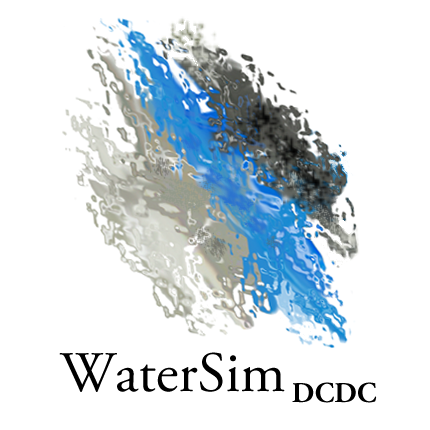
<style>
.page{position:relative;width:430px;height:430px;background:#ffffff}
.page>*{position:absolute;margin:0}
.t1{font:57.3px "AGaramondPro-Regular";color:#000000}
.t2{font:28.7px "AGaramondPro-Bold";color:#000000}
</style>
<div class="page">
<p class="t1" style="left:59px;top:352px;width:226px;height:40px">WaterSim</p>
<p class="t2" style="left:292px;top:382px;width:85px;height:21px">DCDC</p>
</div>
